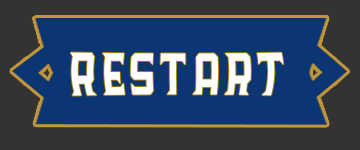
<style>
.page{position:relative;width:360px;height:150px;background:#0c3573}
.page>*{position:absolute;margin:0}
.t1{font:62.5px "Lorde-Havana";letter-spacing:0.1em;color:#ffffff;scale:0.75 1}
</style>
<div class="page">
<p class="t1" style="left:70px;top:52px;width:214px;height:44px">REStart</p>
</div>
